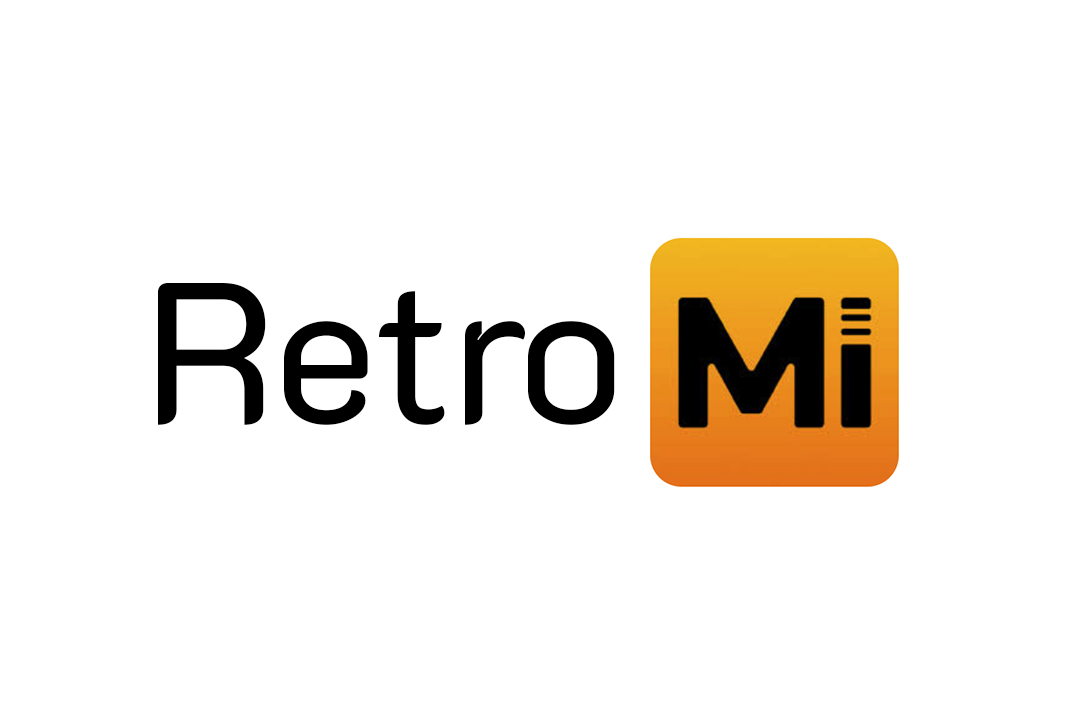
<style>
.page{position:relative;width:1080px;height:720px;background:#ffffff}
.page>*{position:absolute;margin:0}
.t1{font:200px "K2D-Regular";color:#000000}
</style>
<div class="page">
<p class="t1" style="left:158px;top:283px;width:457px;height:142px">Retro</p>
</div>
